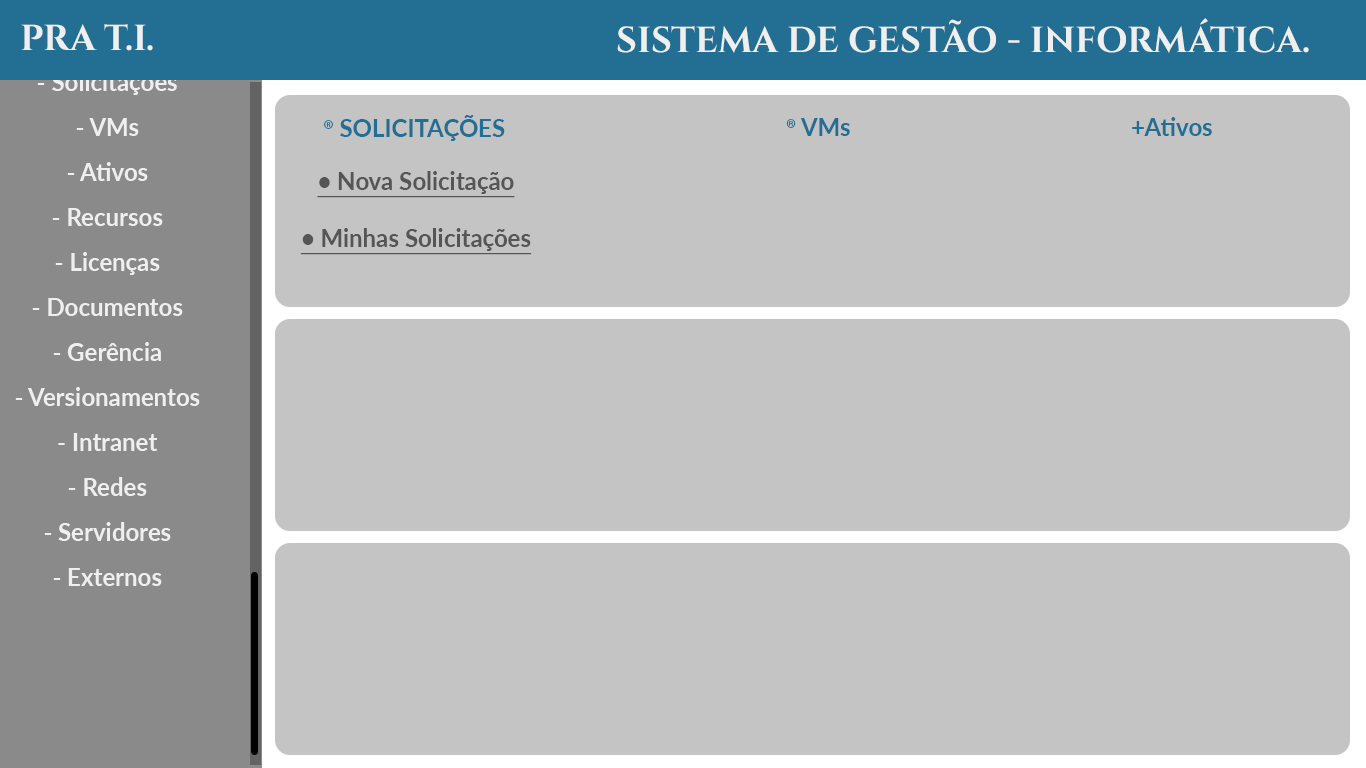
<style>
.page{position:relative;width:1366px;height:768px;background:#c4c4c4}
.page>*{position:absolute;margin:0}
.t1{font:36px "CinzelRoman-Bold";color:#efefef}
.t2{font:24px "Lato-Bold";color:#efefef}
.t3{font:24px "Lato-Bold";color:#236f93}
.t4{font:24px "MyriadPro-Regular";color:#236f93}
.t5{font:24px "Lato-Bold";color:#555555;text-decoration:underline}
</style>
<div class="page">
<p class="t1" style="left:21px;top:24px;width:132px;height:27px">PRA T.I.</p>
<p class="t1" style="left:617px;top:18px;width:692px;height:35px">SISTEMA DE GESTÃO - INFORMÁTICA.</p>
<p class="t2" style="left:37px;top:72px;width:140px;height:23px">- Solicitações</p>
<p class="t2" style="left:76px;top:118px;width:63px;height:18px">- VMs</p>
<p class="t3" style="left:324px;top:115px;width:181px;height:26px"><span class="t4">®</span> SOLICITAÇÕES</p>
<p class="t3" style="left:786px;top:118px;width:64px;height:18px"><span class="t4">®</span> VMs</p>
<p class="t3" style="left:1132px;top:117px;width:80px;height:19px">+Ativos</p>
<p class="t2" style="left:67px;top:162px;width:81px;height:19px">- Ativos</p>
<p class="t5" style="left:317px;top:171px;width:198px;height:27px">• Nova Solicitação</p>
<p class="t2" style="left:52px;top:208px;width:111px;height:18px">- Recursos</p>
<p class="t5" style="left:300px;top:228px;width:232px;height:27px">• Minhas Solicitações</p>
<p class="t2" style="left:55px;top:252px;width:105px;height:23px">- Licenças</p>
<p class="t2" style="left:32px;top:298px;width:151px;height:18px">- Documentos</p>
<p class="t2" style="left:53px;top:342px;width:108px;height:19px">- Gerência</p>
<p class="t2" style="left:15px;top:387px;width:185px;height:19px">- Versionamentos</p>
<p class="t2" style="left:58px;top:433px;width:100px;height:18px">- Intranet</p>
<p class="t2" style="left:68px;top:477px;width:79px;height:19px">- Redes</p>
<p class="t2" style="left:44px;top:522px;width:127px;height:19px">- Servidores</p>
<p class="t2" style="left:53px;top:568px;width:109px;height:18px">- Externos</p>
</div>
